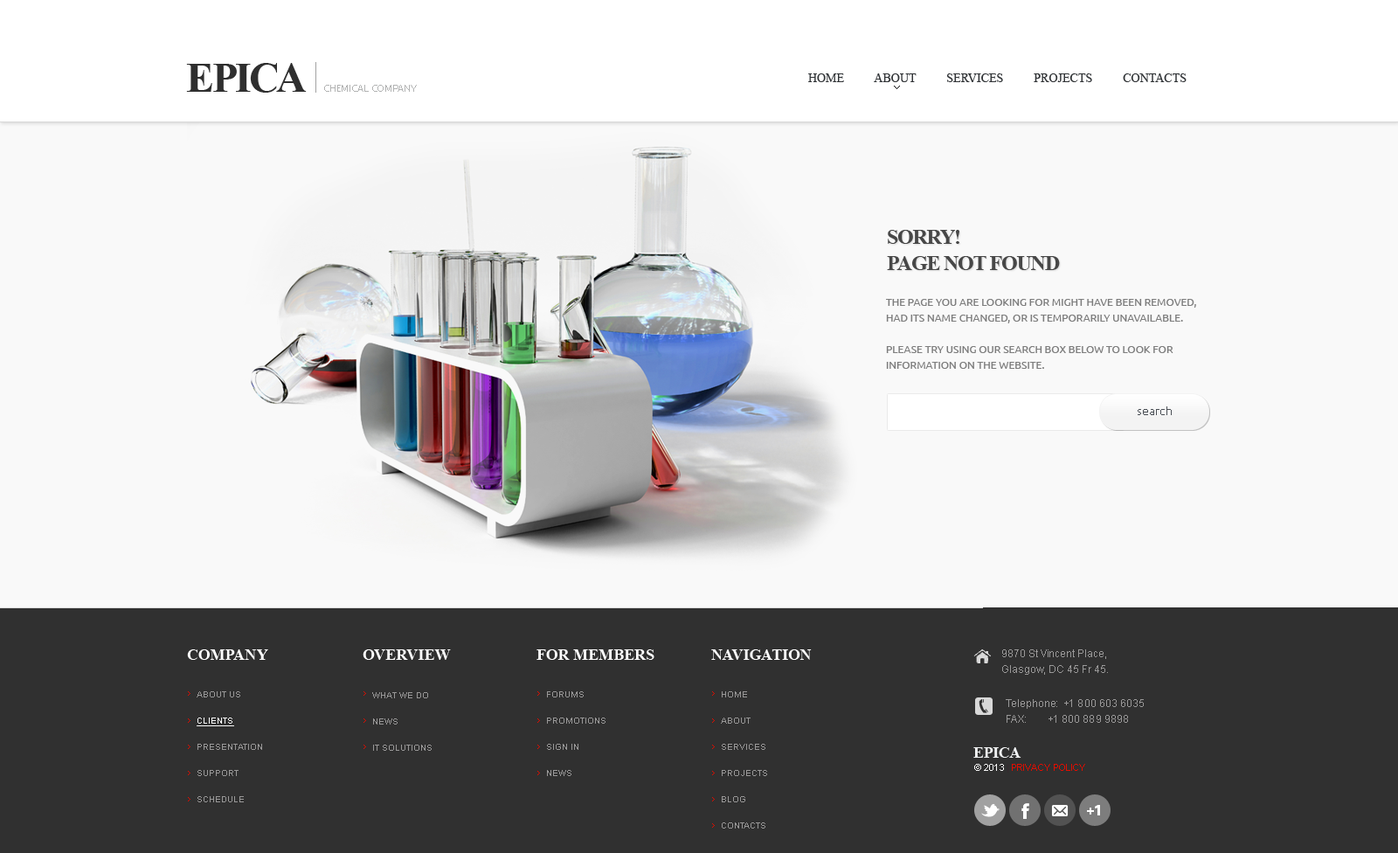
<style>
.page{position:relative;width:1398px;height:853px;background:#f9f9f9}
.page>*{position:absolute;margin:0}
.t1{font:41.9px "TimesNewRomanPS-BoldMT";letter-spacing:-0.025em;color:#2f2f2f;text-transform:uppercase}
.t2{font:12.2px "TimesNewRomanPSMT";color:#303336;text-transform:uppercase}
.t3{font:9.6px "Ubuntu-Regular";letter-spacing:-0.025em;color:#b2b3b3;text-transform:uppercase}
.t4{font:21px/26.2px "TimesNewRomanPS-BoldMT";letter-spacing:-0.05em;color:#474747;text-transform:uppercase}
.t5{font:10.5px/15.7px "Ubuntu";color:#7d7d7d;text-transform:uppercase}
.t6{font:10.5px/15.7px "Ubuntu";color:#7d7d7d}
.t7{font:10.5px/15.7px "TimesNewRomanPSMT";color:#7d7d7d}
.t8{font:11.4px "Ubuntu";color:#4a4f55}
.t9{font:15.7px "TimesNewRomanPS-BoldMT";color:#ffffff;text-transform:uppercase}
.t10{font:10.5px/15.7px "ArialMT";color:#999898}
.t11{font:8.7px/26.2px "Arial-BoldMT";color:#999898;text-transform:uppercase}
.t12{font:8.7px/26.2px "Arial-BoldMT";color:#f9f9f9;text-transform:uppercase;text-decoration:underline}
.t13{font:15.7px "TimesNewRomanPS-BoldMT";color:#f1f3f4;text-transform:uppercase}
.t14{font:9.6px "ArialMT";color:#e10d00;text-transform:uppercase}
.t15{font:9.6px "ArialMT";color:#f9f9f9;text-transform:uppercase}
.t16{font:9.6px "ArialMT";color:#35292e;text-transform:uppercase}
</style>
<div class="page">
<p class="t1" style="left:186px;top:63px;width:121px;height:30px">Epica</p>
<p class="t2" style="left:808px;top:73px;width:379px;height:9px">home          about          services          projects          contacts</p>
<p class="t3" style="left:324px;top:85px;width:93px;height:7px">chemical company</p>
<p class="t4" style="left:887px;top:230px;width:173px;height:40px">sorry!<br>page not found</p>
<p class="t5" style="left:886px;top:299px;width:310px;height:70px"><span class="t6"><br></span>The page you are looking for might have been removed, had its name changed, or is temporarily unavailable.<br><br>Please try using our search box below to look for <br>information on the website.<br><br><br><br><br>. <br><br><br><span class="t6"><br><br><br><br><br><br> incididunt ut labore et dolore magna aliqua.             </span><span class="t7">                       Ut enim ad minim veniam, quis nostrud exercitation. ullamco laboris nisi ut aliquip <br>ex ea commodo consequat.</span></p>
<p class="t8" style="left:1138px;top:406px;width:34px;height:9px">search</p>
<p class="t9" style="left:187px;top:649px;width:81px;height:11px">company</p>
<p class="t9" style="left:363px;top:649px;width:88px;height:11px">overview</p>
<p class="t9" style="left:537px;top:649px;width:118px;height:11px">for members</p>
<p class="t9" style="left:711px;top:649px;width:101px;height:11px">navigation</p>
<p class="t10" style="left:1002px;top:649px;width:106px;height:26px">9870 St Vincent Place,<br>Glasgow, DC 45 Fr 45.</p>
<p class="t11" style="left:197px;top:691px;width:65px;height:111px">ABOUT US<br>    <span class="t12">CLIENTS<br></span>    PRESENTATION<br>    support<br>    Schedule</p>
<p class="t11" style="left:372px;top:692px;width:60px;height:59px">What We Do<br>    news<br>    it solutions</p>
<p class="t11" style="left:547px;top:691px;width:59px;height:85px">FORUMS<br>    PROMOTIONS<br>    SIGN IN<br>    News</p>
<p class="t11" style="left:721px;top:691px;width:46px;height:137px">Home<br>    About<br>    services<br>    projects<br>    Blog<br>    Contacts</p>
<p class="t10" style="left:1006px;top:699px;width:138px;height:24px">Telephone:  +1 800 603 6035<br>FAX:        +1 800 889 9898</p>
<p class="t13" style="left:973px;top:747px;width:49px;height:11px">epica</p>
<p class="t14" style="left:974px;top:764px;width:111px;height:8px"><span class="t15">© 2013</span><span class="t16"> | </span>Privacy policy</p>
</div>
